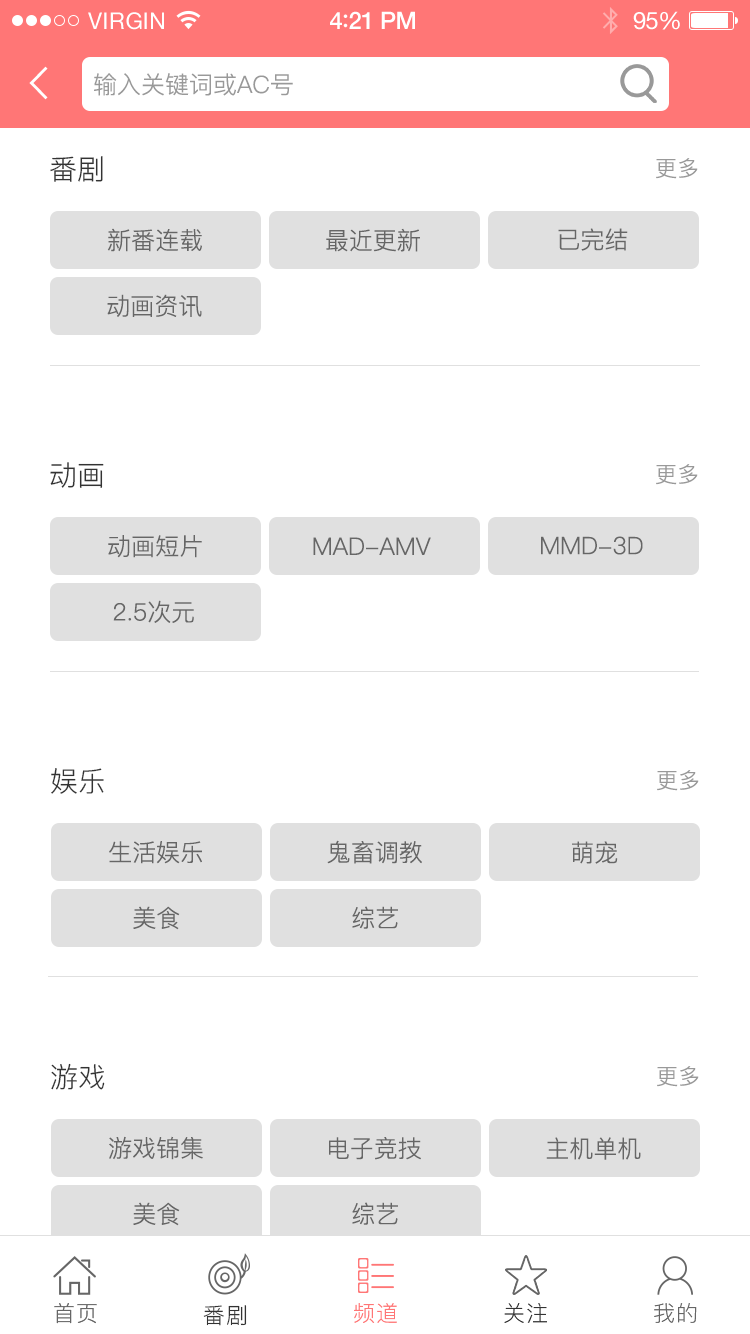
<style>
.page{position:relative;width:750px;height:1334px;background:#ffffff}
.page>*{position:absolute;margin:0}
.t1{font:23px "HelveticaNeue";letter-spacing:0.02em;color:#ffffff}
.t2{font:24px "HelveticaNeue-Medium";letter-spacing:-0.02em;color:#ffffff}
.t3{font:26px "Avenir-Medium";letter-spacing:-0.02em;color:#ffffff}
.t4{font:24px "HelveticaNeue";letter-spacing:-0.02em;color:#ffffff}
.t5{font:24px "PingFang-SC-Regular";color:#999999}
.t6{font:28px "PingFang-SC-Regular";color:#333333}
.t7{font:22px "PingFang-SC-Regular";color:#999999}
.t8{font:24px "PingFang-SC-Regular";color:#666666}
.t9{font:22px "PingFang-SC-Regular";letter-spacing:0.05em;color:#666666}
.t10{font:22px "PingFang-SC-Regular";letter-spacing:0.05em;color:#333333}
.t11{font:22px "PingFang-SC-Regular";letter-spacing:0.05em;color:#ff7676}
</style>
<div class="page">
<p class="t1" style="left:88px;top:12px;width:76px;height:18px">VIRGIN</p>
<p class="t2" style="left:330px;top:11px;width:85px;height:18px">4<span class="t3">:</span>21 PM</p>
<p class="t4" style="left:633px;top:11px;width:47px;height:19px">95%</p>
<p class="t5" style="left:94px;top:73px;width:199px;height:23px">输入关键词或AC号</p>
<p class="t6" style="left:50px;top:156px;width:53px;height:26px">番剧</p>
<p class="t7" style="left:656px;top:158px;width:42px;height:21px">更多</p>
<p class="t8" style="left:107px;top:228px;width:95px;height:24px">新番连载</p>
<p class="t8" style="left:326px;top:228px;width:94px;height:24px">最近更新</p>
<p class="t8" style="left:558px;top:228px;width:70px;height:23px">已完结</p>
<p class="t8" style="left:107px;top:294px;width:95px;height:23px">动画资讯</p>
<p class="t6" style="left:50px;top:462px;width:54px;height:26px">动画</p>
<p class="t7" style="left:656px;top:464px;width:42px;height:21px">更多</p>
<p class="t8" style="left:108px;top:535px;width:94px;height:23px">动画短片</p>
<p class="t8" style="left:313px;top:537px;width:118px;height:18px">MAD-AMV</p>
<p class="t8" style="left:541px;top:536px;width:102px;height:19px">MMD-3D</p>
<p class="t8" style="left:113px;top:600px;width:81px;height:23px">2.5次元</p>
<p class="t6" style="left:51px;top:768px;width:53px;height:26px">娱乐</p>
<p class="t7" style="left:657px;top:770px;width:42px;height:21px">更多</p>
<p class="t8" style="left:109px;top:841px;width:93px;height:23px">生活娱乐</p>
<p class="t8" style="left:327px;top:840px;width:95px;height:24px">鬼畜调教</p>
<p class="t8" style="left:572px;top:841px;width:46px;height:23px">萌宠</p>
<p class="t8" style="left:133px;top:906px;width:47px;height:24px">美食</p>
<p class="t8" style="left:352px;top:906px;width:46px;height:23px">综艺</p>
<p class="t6" style="left:51px;top:1063px;width:54px;height:27px">游戏</p>
<p class="t7" style="left:657px;top:1066px;width:42px;height:21px">更多</p>
<p class="t8" style="left:109px;top:1136px;width:94px;height:24px">游戏锦集</p>
<p class="t8" style="left:329px;top:1137px;width:92px;height:23px">电子竞技</p>
<p class="t8" style="left:546px;top:1137px;width:95px;height:23px">主机单机</p>
<p class="t8" style="left:133px;top:1202px;width:47px;height:24px">美食</p>
<p class="t8" style="left:352px;top:1202px;width:46px;height:23px">综艺</p>
<p class="t9" style="left:54px;top:1303px;width:43px;height:21px">首页</p>
<p class="t10" style="left:203px;top:1305px;width:44px;height:21px">番剧</p>
<p class="t11" style="left:354px;top:1303px;width:43px;height:20px">频道</p>
<p class="t10" style="left:504px;top:1303px;width:43px;height:20px">关注</p>
<p class="t9" style="left:654px;top:1303px;width:43px;height:20px">我的</p>
</div>
